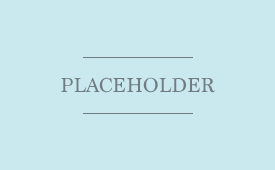
<style>
.page{position:relative;width:275px;height:170px;background:#cae9ee}
.page>*{position:absolute;margin:0}
.t1{font:21px "Marion-Regular";color:#6f7d83}
</style>
<div class="page">
<p class="t1" style="left:61px;top:77px;width:154px;height:16px">PLACEHOLDER</p>
</div>
